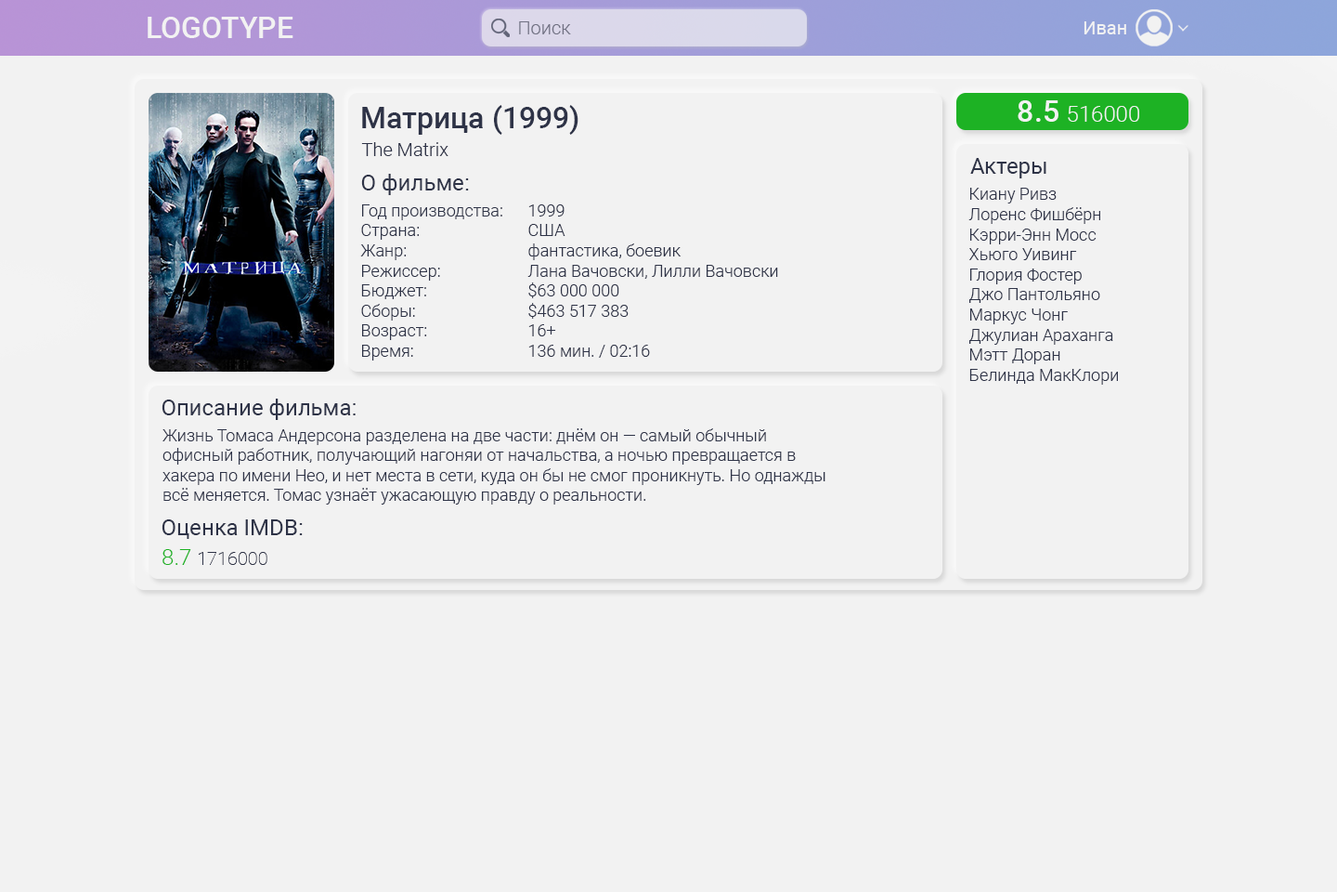
<style>
.page{position:relative;width:1337px;height:892px;background:#f2f2f2}
.page>*{position:absolute;margin:0}
.t1{font:29.7px "Roboto-Medium";color:#f2f2f2}
.t2{font:18.6px "Roboto-Light";color:#717183}
.t3{font:18.6px "Roboto-Regular";color:#f2f2f2}
.t4{font:22.3px "Roboto-Light";color:#f2f2f2}
.t5{font:29.7px "Roboto-Medium";color:#2e3347}
.t6{font:18.6px "Roboto-Light";color:#2e3347}
.t7{font:22.3px "Roboto-Regular";color:#2e3347}
.t8{font:16.7px "Roboto-Light";color:#2e3347}
.t9{font:18.6px "Roboto-Thin";color:#2e3347}
.t10{font:22.3px "Roboto-Light";color:#1db224}
</style>
<div class="page">
<p class="t1" style="left:148px;top:17px;width:145px;height:21px">LOGOTYPE</p>
<p class="t2" style="left:519px;top:21px;width:52px;height:13px">Поиск</p>
<p class="t3" style="left:1084px;top:21px;width:43px;height:13px">Иван</p>
<p class="t4" style="left:1018px;top:100px;width:122px;height:22px"><span class="t1">8.5 </span>516000</p>
<p class="t5" style="left:362px;top:105px;width:217px;height:30px">Матрица (1999)</p>
<p class="t6" style="left:361px;top:142px;width:88px;height:14px">The Matrix</p>
<p class="t7" style="left:971px;top:158px;width:76px;height:20px">Актеры</p>
<p class="t7" style="left:361px;top:174px;width:108px;height:21px">О фильме:</p>
<p class="t8" style="left:969px;top:188px;width:149px;height:197px">Киану Ривз<br>    Лоренс Фишбёрн<br>    Кэрри-Энн Мосс<br>    Хьюго Уивинг<br>    Глория Фостер<br>    Джо Пантольяно<br>    Маркус Чонг<br>    Джулиан Араханга<br>    Мэтт Доран<br>    Белинда МакКлори</p>
<p class="t8" style="left:360px;top:204px;width:418px;height:156px">Год производства:  1999<br>Страна:     США<br>Жанр:     фантастика, боевик<br>Режиссер:    Лана Вачовски, Лилли Вачовски<br>Бюджет:    $63 000 000<br>Сборы:     $463 517 383<br>Возраст:    16+<br>Время:     136 мин. / 02:16</p>
<p class="t7" style="left:162px;top:398px;width:194px;height:22px">Описание фильма:</p>
<p class="t8" style="left:163px;top:428px;width:663px;height:76px">Жизнь Томаса Андерсона разделена на две части: днём он — самый обычный офисный работник, получающий нагоняи от начальства, а ночью превращается в хакера по имени Нео, и нет места в сети, куда он бы не смог проникнуть. Но однажды всё меняется. Томас узнаёт ужасающую правду о реальности.</p>
<p class="t7" style="left:162px;top:519px;width:141px;height:20px">Оценка IMDB:</p>
<p class="t9" style="left:163px;top:549px;width:104px;height:16px"><span class="t10">8.7 </span>1716000</p>
</div>
